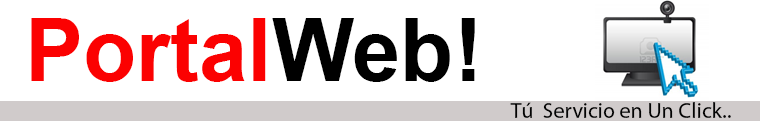
<style>
.page{position:relative;width:760px;height:130px;background:#ffffff}
.page>*{position:absolute;margin:0}
.t1{font:87px "Arial-BoldMT";color:#fb0101}
.t2{font:87px "Arial-BoldMT";color:#000000}
.t3{font:22px "MyriadPro-Regular";color:#030303}
</style>
<div class="page">
<p class="t1" style="left:31px;top:18px;width:444px;height:64px">Portal<span class="t2">Web!</span></p>
<p class="t3" style="left:510px;top:102px;width:221px;height:16px">Tú  Servicio en Un Click..</p>
</div>
